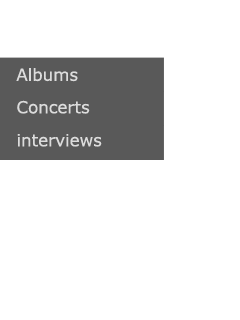
<style>
.page{position:relative;width:240px;height:320px;background:#ffffff}
.page>*{position:absolute;margin:0}
.t1{font:16.7px "Verdana";color:#dcdcdc}
</style>
<div class="page">
<p class="t1" style="left:16px;top:68px;width:62px;height:14px">Albums</p>
<p class="t1" style="left:17px;top:100px;width:73px;height:14px">Concerts</p>
<p class="t1" style="left:17px;top:134px;width:85px;height:13px">interviews</p>
</div>
